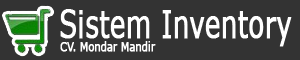
<style>
.page{position:relative;width:300px;height:60px;background:#333333}
.page>*{position:absolute;margin:0}
.t1{font:38.7px "Verdana";color:#ffffff;font-weight:bold;scale:0.66 1}
.t2{font:12px "Verdana";color:#ffffff;font-weight:bold;scale:0.8 1}
</style>
<div class="page">
<p class="t1" style="left:60px;top:9px;width:232px;height:38px">Sistem Inventory</p>
<p class="t2" style="left:60px;top:41px;width:96px;height:11px">CV. Mondar Mandir</p>
</div>
